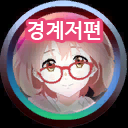
<style>
.page{position:relative;width:128px;height:128px}
.page>*{position:absolute;margin:0}
.t1{font:20px "NanumGothicBold";color:#ffffff}
</style>
<div class="page">
<p class="t1" style="left:28px;top:21px;width:73px;height:19px">경계저편</p>
</div>
